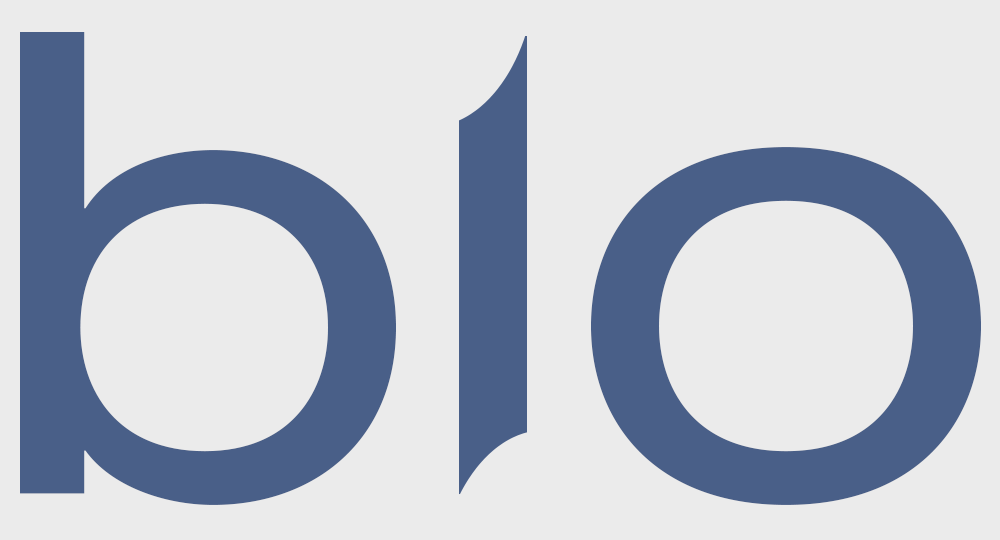
<style>
.page{position:relative;width:1000px;height:540px;background:#ebebeb}
.page>*{position:absolute;margin:0}
.t1{font:641.3px "HelveticaNeue-Extended";letter-spacing:-0.025em;color:#495f88}
</style>
<div class="page">
<p class="t1" style="left:20px;top:32px;width:961px;height:473px">bIo</p>
</div>
